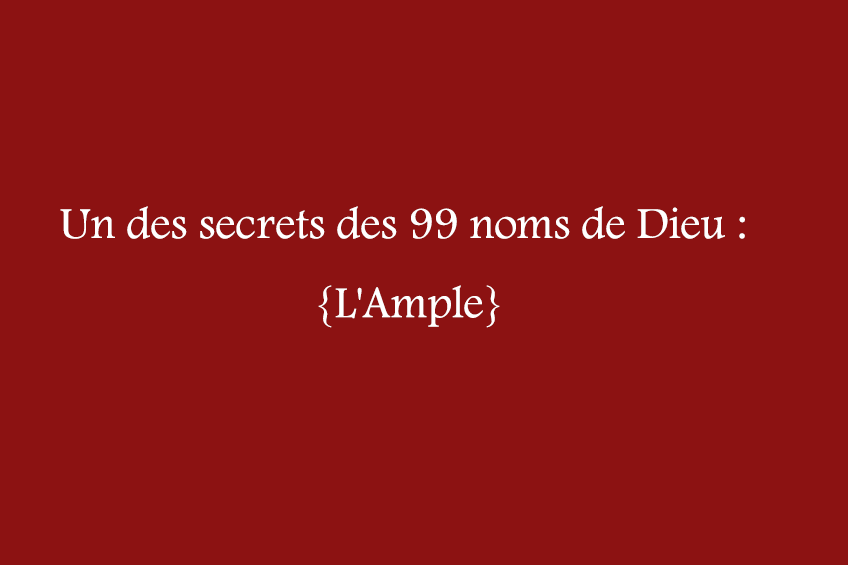
<style>
.page{position:relative;width:848px;height:565px;background:#8c1212}
.page>*{position:absolute;margin:0}
.t1{font:45.8px/79.2px "FootlightMTLight";color:#ffffff}
</style>
<div class="page">
<p class="t1" style="left:60px;top:206px;width:685px;height:122px;text-align:center">Un des secrets des 99 noms de Dieu : <br>{L'Ample}</p>
</div>
